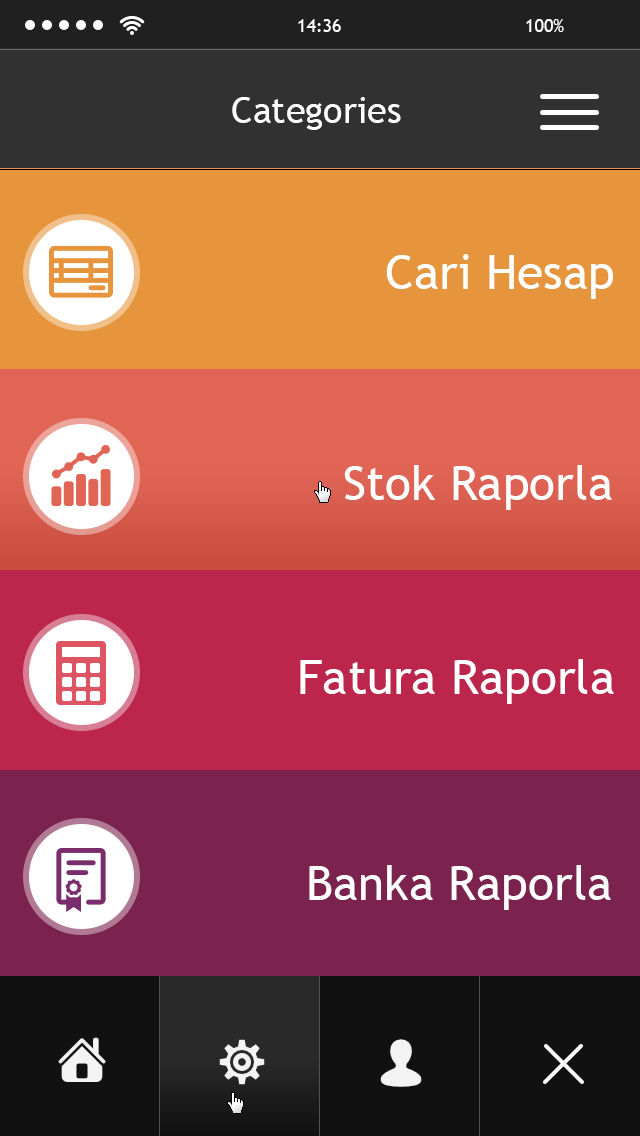
<style>
.page{position:relative;width:640px;height:1136px}
.page>*{position:absolute;margin:0}
.t1{font:36px "TrebuchetMS";color:#ffffff}
.t2{font:48px "TrebuchetMS";color:#ffffff}
</style>
<div class="page">
<p class="t1" style="left:232px;top:97px;width:169px;height:33px">Categories</p>
<p class="t2" style="left:386px;top:254px;width:227px;height:45px">Cari Hesap</p>
<p class="t2" style="left:344px;top:465px;width:268px;height:45px">Stok Raporla</p>
<p class="t2" style="left:300px;top:659px;width:314px;height:45px">Fatura Raporla</p>
<p class="t2" style="left:309px;top:865px;width:302px;height:45px">Banka Raporla</p>
</div>
